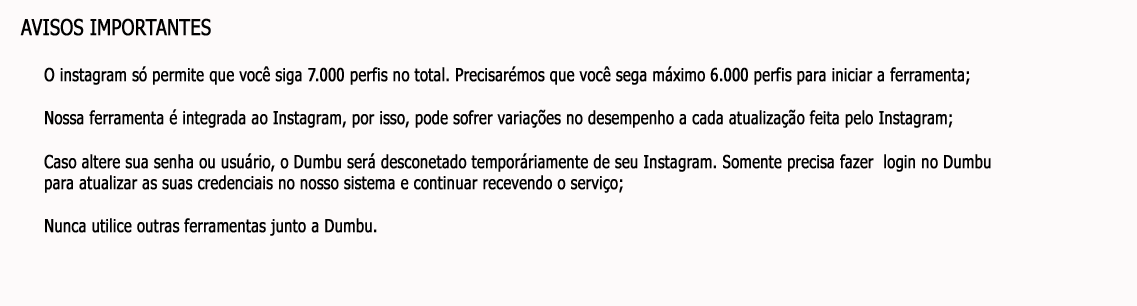
<style>
.page{position:relative;width:1137px;height:306px;background:#fdfafa}
.page>*{position:absolute;margin:0}
.t1{font:22px "Tahoma";color:#000000;font-weight:bold;scale:0.81 1}
.t2{font:18px "Tahoma";color:#000000;font-weight:bold;scale:0.81 1}
</style>
<div class="page">
<p class="t1" style="left:20px;top:18px;width:191px;height:18px">AVISOS IMPORTANTES</p>
<p class="t2" style="left:44px;top:66px;width:947px;height:170px">O instagram só permite que você siga 7.000 perfis no total. Precisarémos que você sega máximo 6.000 perfis para iniciar a ferramenta;<br><br>Nossa ferramenta é integrada ao Instagram, por isso, pode sofrer variações no desempenho a cada atualização feita pelo Instagram;<br><br>Caso altere sua senha ou usuário, o Dumbu será desconetado temporáriamente de seu Instagram. Somente precisa fazer  login no Dumbu<br>para atualizar as suas credenciais no nosso sistema e continuar recevendo o serviço;<br><br>Nunca utilice outras ferramentas junto a Dumbu.</p>
</div>
